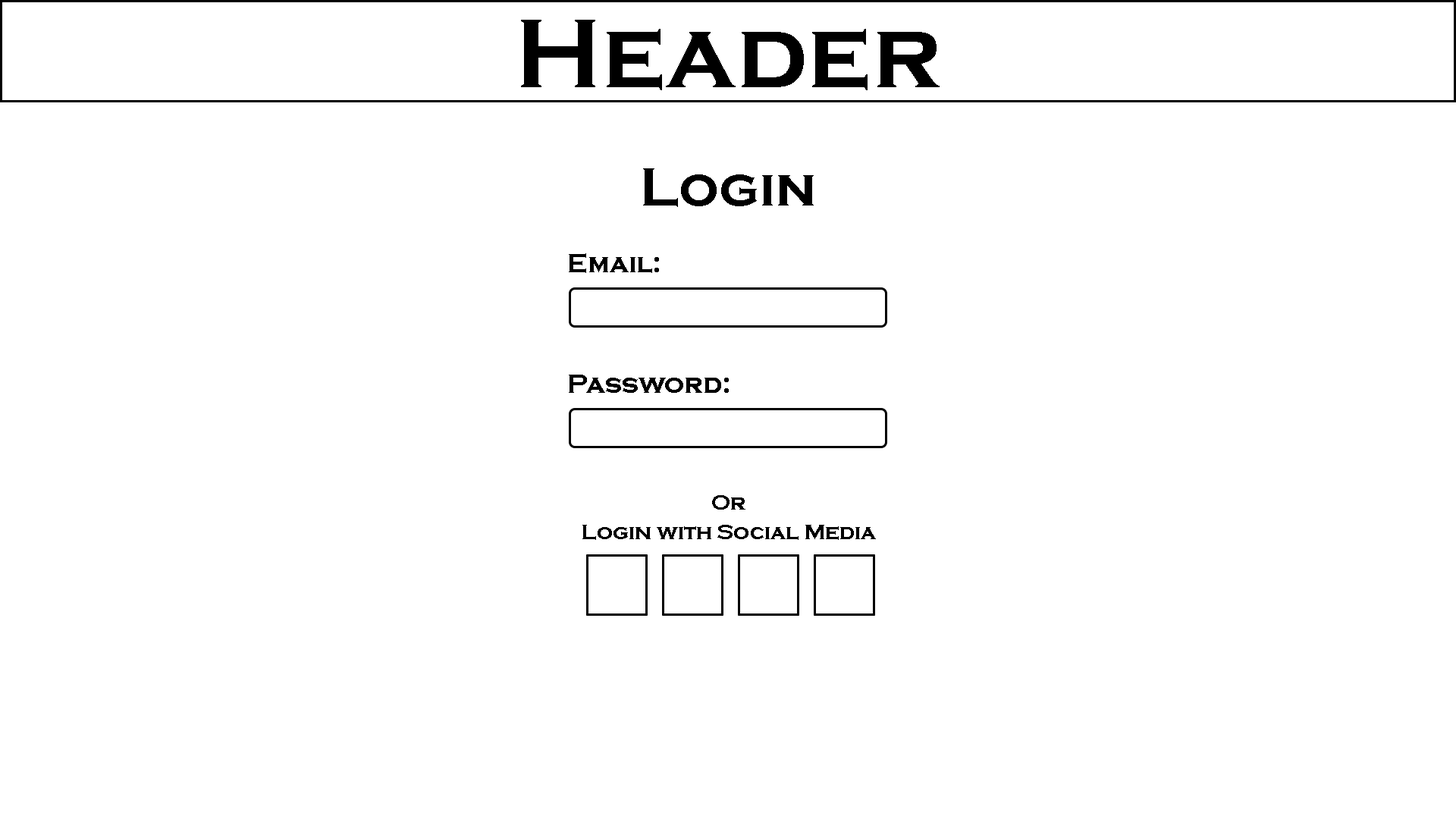
<style>
.page{position:relative;width:1456px;height:819px;background:#ffffff}
.page>*{position:absolute;margin:0}
.t1{font:100.9px "CopperplateGothic-Bold";color:#000000}
.t2{font:56.1px "CopperplateGothic-Bold";color:#000000}
.t3{font:27.3px "CopperplateGothic-Bold";color:#000000}
.t4{font:22px "CopperplateGothic-Bold";color:#000000}
</style>
<div class="page">
<p class="t1" style="left:521px;top:20px;width:419px;height:70px">Header</p>
<p class="t2" style="left:643px;top:168px;width:171px;height:39px">Login</p>
<p class="t3" style="left:569px;top:253px;width:90px;height:20px">Email:</p>
<p class="t3" style="left:569px;top:375px;width:160px;height:18px">Password:</p>
<p class="t4" style="left:712px;top:495px;width:33px;height:15px">Or</p>
<p class="t4" style="left:582px;top:525px;width:294px;height:15px">Login with Social Media</p>
</div>
